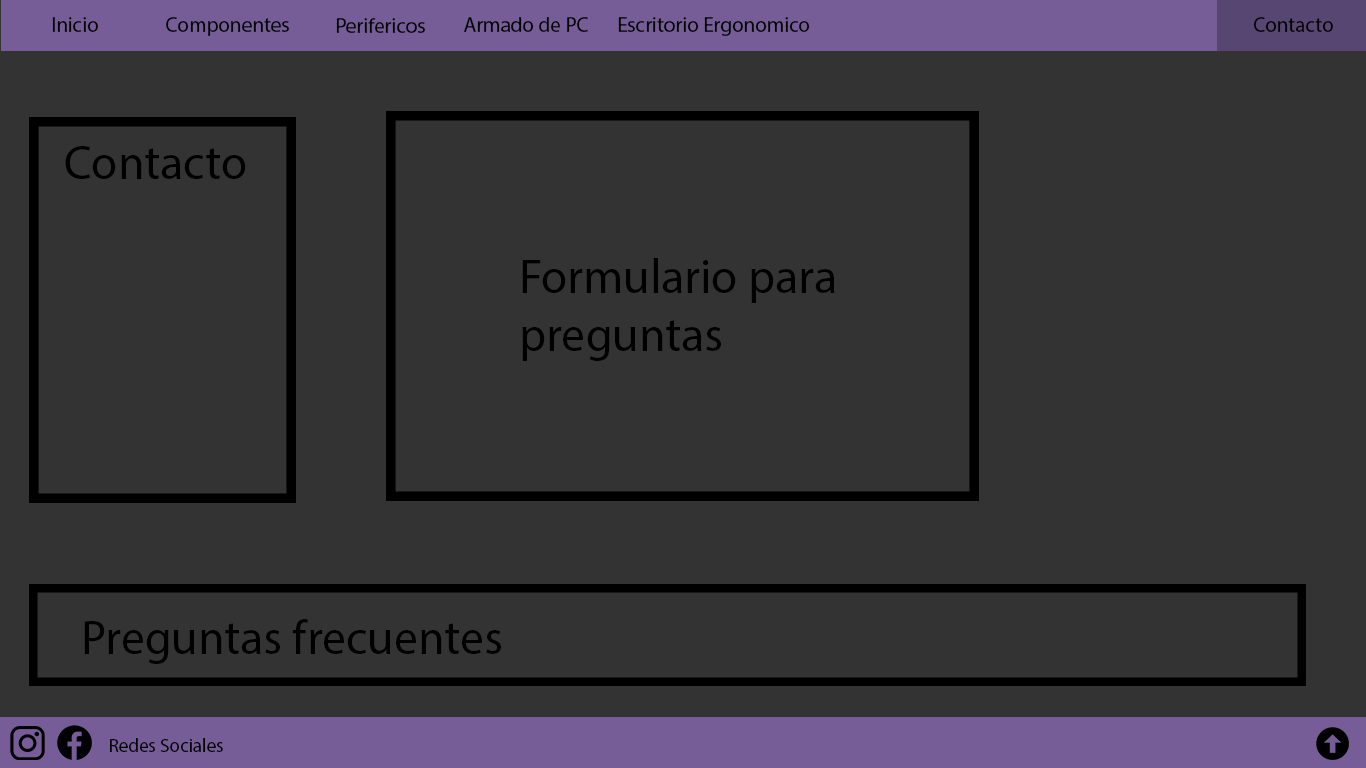
<style>
.page{position:relative;width:1366px;height:768px;background:#333333}
.page>*{position:absolute;margin:0}
.t1{font:21px "MyriadPro-Regular";color:#000000}
.t2{font:48px "MyriadPro-Regular";color:#000000}
.t3{font:19px "MyriadPro-Regular";color:#000000}
</style>
<div class="page">
<p class="t1" style="left:52px;top:17px;width:46px;height:15px">Inicio</p>
<p class="t1" style="left:166px;top:17px;width:123px;height:19px">Componentes</p>
<p class="t1" style="left:464px;top:17px;width:124px;height:15px">Armado de PC</p>
<p class="t1" style="left:618px;top:17px;width:192px;height:19px">Escritorio Ergonomico</p>
<p class="t1" style="left:1253px;top:17px;width:80px;height:15px">Contacto</p>
<p class="t1" style="left:336px;top:18px;width:89px;height:15px">Perifericos</p>
<p class="t2" style="left:65px;top:146px;width:181px;height:33px">Contacto</p>
<p class="t2" style="left:522px;top:258px;width:313px;height:103px">Formulario para <br>preguntas</p>
<p class="t2" style="left:84px;top:619px;width:417px;height:45px">Preguntas frecuentes</p>
<p class="t3" style="left:110px;top:738px;width:113px;height:14px">Redes Sociales</p>
</div>
